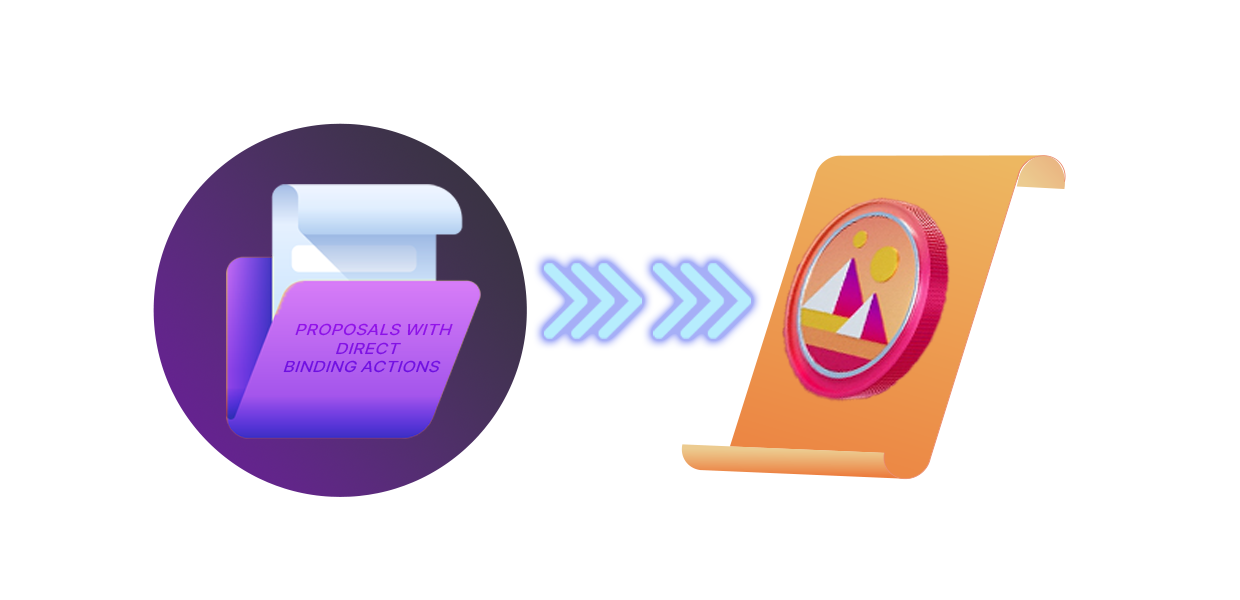
<style>
.page{position:relative;width:1240px;height:600px;background:#ffffff}
.page>*{position:absolute;margin:0}
.t1{font:16px "Inter-Medium";color:#8011e4;text-transform:uppercase;scale:1.08 1}
</style>
<div class="page">
<p class="t1" style="left:283px;top:323px;width:170px;height:50px;text-align:center">proposals with <br>direct <br>binding actions</p>
</div>
